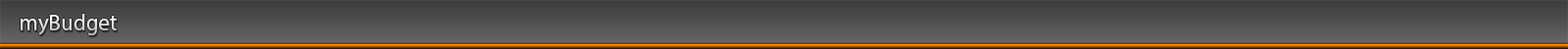
<style>
.page{position:relative;width:1568px;height:49px}
.page>*{position:absolute;margin:0}
.t1{font:22.6px "MyriadPro-Regular";color:#e3e3e3}
</style>
<div class="page">
<p class="t1" style="left:21px;top:14px;width:97px;height:21px">myBudget</p>
</div>
